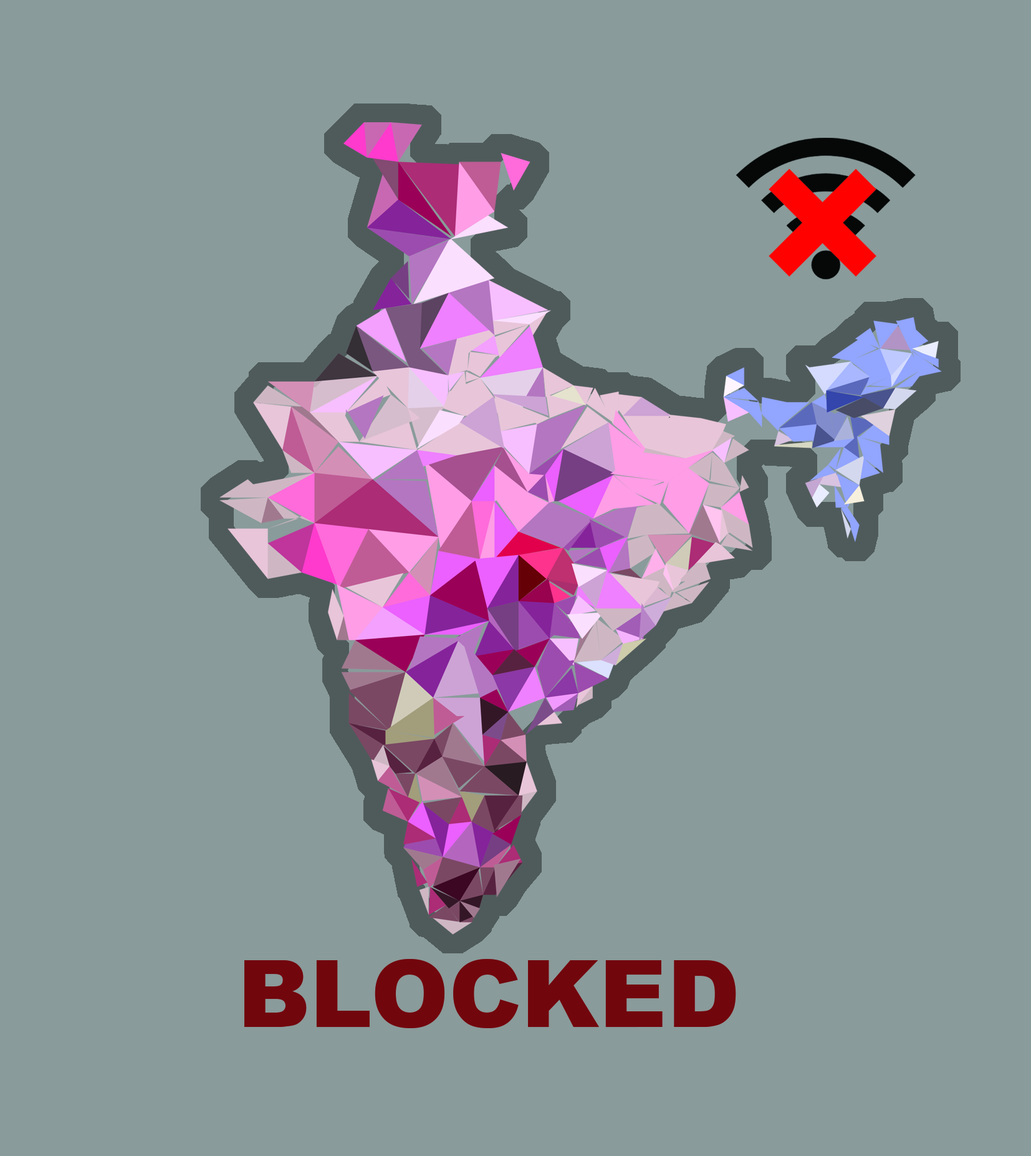
<style>
.page{position:relative;width:1031px;height:1156px;background:#899b9a}
.page>*{position:absolute;margin:0}
.t1{font:93.5px "Arial-Black";color:#71060d}
</style>
<div class="page">
<p class="t1" style="left:244px;top:959px;width:492px;height:69px">BLOCKED</p>
</div>
